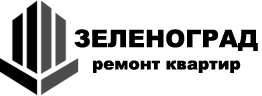
<style>
.page{position:relative;width:262px;height:96px;background:#ffffff}
.page>*{position:absolute;margin:0}
.t1{font:24.2px "Arial-Black";color:#000000}
.t2{font:16.8px "Arial-Black";color:#000000}
</style>
<div class="page">
<p class="t1" style="left:74px;top:29px;width:184px;height:22px">ЗЕЛЕНОГРАД</p>
<p class="t2" style="left:93px;top:60px;width:148px;height:13px">ремонт квартир</p>
</div>
